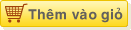
<style>
.page{position:relative;width:131px;height:30px}
.page>*{position:absolute;margin:0}
.t1{font:14px "VNI-Helve-Bold";color:#62605d}
</style>
<div class="page">
<p class="t1" style="left:28px;top:7px;width:95px;height:16px">Theâm vaøo gioû</p>
</div>
